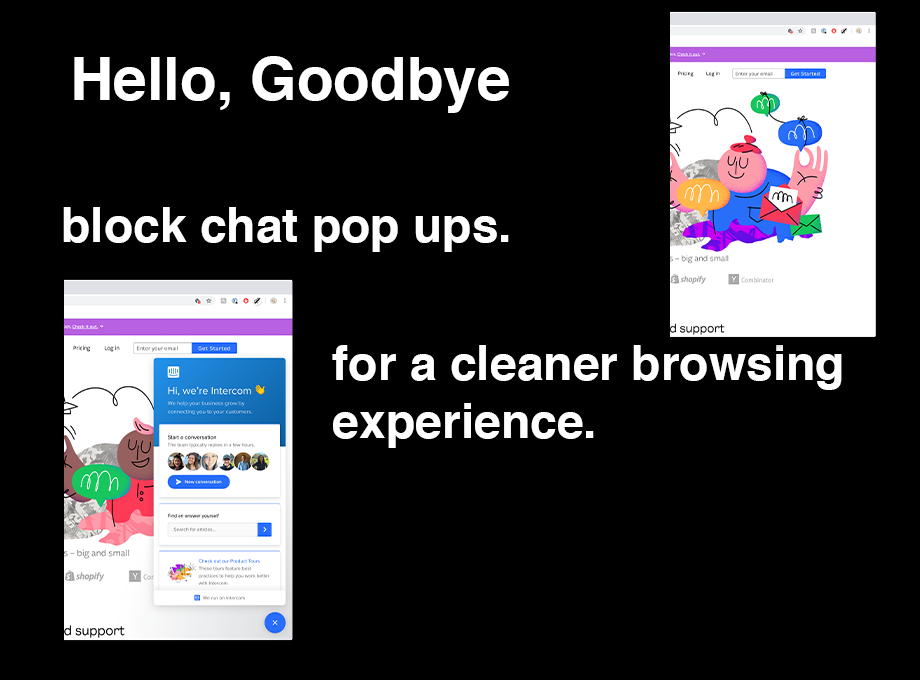
<style>
.page{position:relative;width:920px;height:680px;background:#000000}
.page>*{position:absolute;margin:0}
.t1{font:60px "Helvetica-Bold";color:#ffffff}
.t2{font:48px "Helvetica-Bold";color:#ffffff}
</style>
<div class="page">
<p class="t1" style="left:74px;top:56px;width:435px;height:57px">Hello, Goodbye</p>
<p class="t2" style="left:63px;top:207px;width:446px;height:45px">block chat pop ups.</p>
<p class="t2" style="left:332px;top:345px;width:510px;height:103px">for a cleaner browsing<br>experience.</p>
</div>
